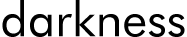
<style>
.page{position:relative;width:187px;height:37px;background:#ffffff}
.page>*{position:absolute;margin:0}
.t1{font:48px "FuturaBT-Book";color:#000000}
</style>
<div class="page">
<p class="t1" style="left:2px;top:0px;width:183px;height:37px">darkness</p>
</div>
